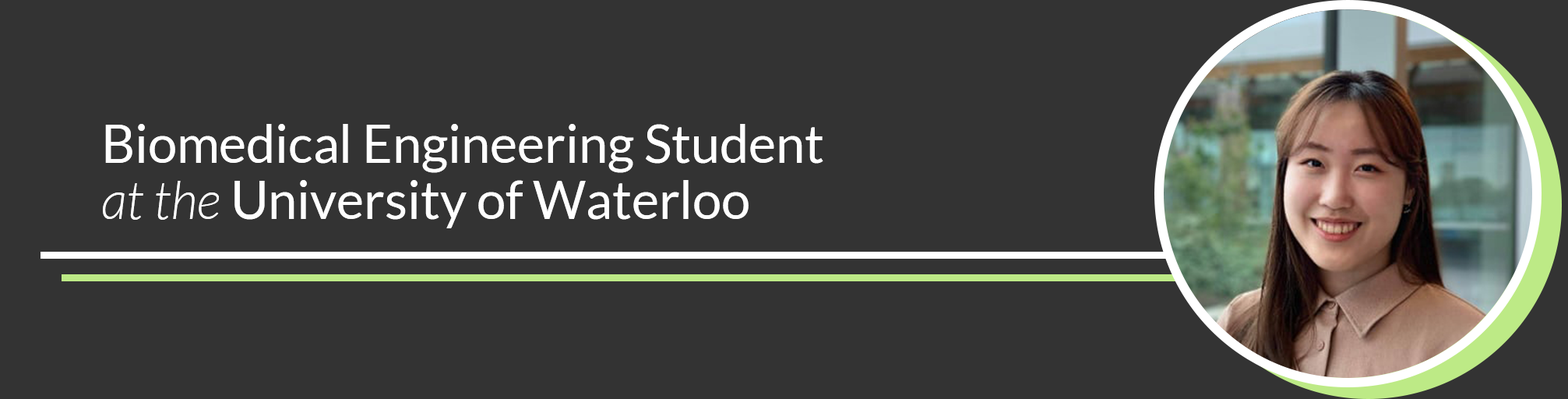
<style>
.page{position:relative;width:1568px;height:399px;background:#333333}
.page>*{position:absolute;margin:0}
.t1{font:51.9px/58.3px "Lato-Regular";color:#ffffff}
.t2{font:51.9px/58.3px "Lato-LightItalic";color:#ffffff}
</style>
<div class="page">
<p class="t1" style="left:103px;top:124px;width:720px;height:104px">Biomedical Engineering Student<br><span class="t2">at the </span>University of Waterloo</p>
</div>
